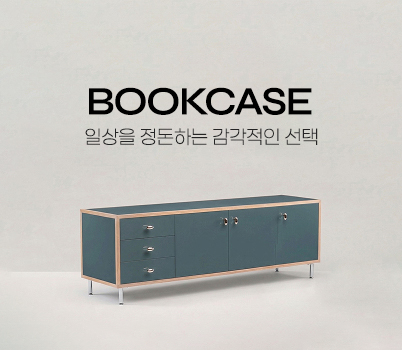
<style>
.page{position:relative;width:402px;height:350px}
.page>*{position:absolute;margin:0}
.t1{font:40.2px "Syne-SemiBold";letter-spacing:-0.04em;color:#000000}
.t2{font:19.4px "Paperlogy-2ExtraLight";color:#242424}
</style>
<div class="page">
<p class="t1" style="left:89px;top:87px;width:223px;height:28px">BOOKCASE</p>
<p class="t2" style="left:85px;top:128px;width:233px;height:18px">일상을 정돈하는 감각적인 선택</p>
</div>
